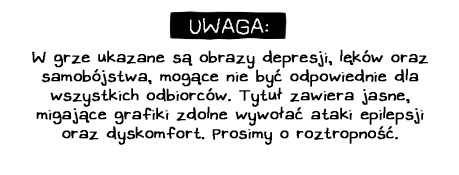
<style>
.page{position:relative;width:459px;height:175px;background:#ffffff}
.page>*{position:absolute;margin:0}
.t1{font:31.8px "OMORI_GAME2";color:#ffffff;text-transform:uppercase}
.t2{font:24px/19px "OMORI_GAME2";letter-spacing:-0.01em;color:#000000;font-weight:bold}
</style>
<div class="page">
<p class="t1" style="left:190px;top:18px;width:78px;height:17px">UWAGA:</p>
<p class="t2" style="left:32px;top:49px;width:396px;height:96px;text-align:center">W grze ukazane są obrazy depresji, lęków oraz samobójstwa, mogące nie być odpowiednie dla wszystkich odbiorców. Tytuł zawiera jasne, migające grafiki zdolne wywołać ataki epilepsji oraz dyskomfort. Prosimy o roztropność.</p>
</div>
